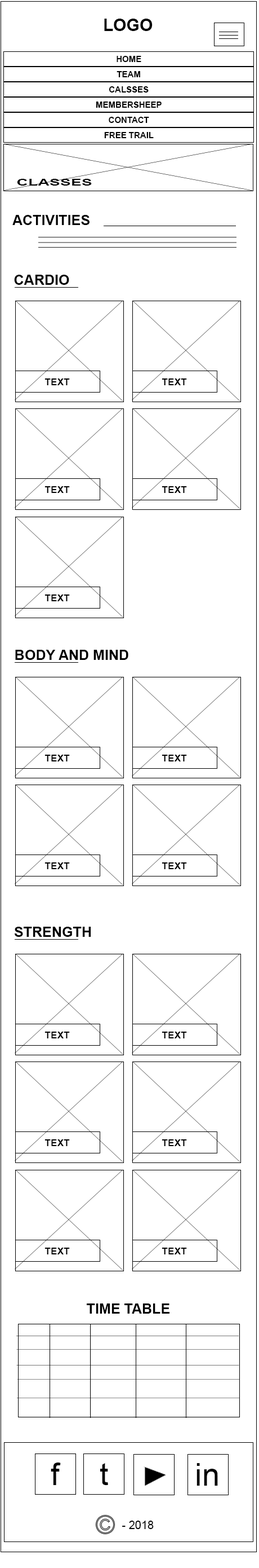
<style>
.page{position:relative;width:259px;height:1568px;background:#ffffff}
.page>*{position:absolute;margin:0}
.t1{font:16.9px "Arial-BoldMT";color:#000000}
.t2{font:8.5px "Arial-BoldMT";color:#000000}
.t3{font:8.8px "Arial-BoldMT";color:#000000;scale:1.82 1}
.t4{font:14.2px "Arial-BoldMT";color:#000000}
.t5{font:9.8px "Arial-BoldMT";color:#000000}
.t6{font:14.1px "Arial-BoldMT";color:#000000}
.t7{font:31.4px "ArialMT";color:#000000}
.t8{font:11.3px "ArialMT";color:#000000}
</style>
<div class="page">
<p class="t1" style="left:104px;top:19px;width:49px;height:12px">LOGO</p>
<p class="t2" style="left:117px;top:56px;width:25px;height:6px">HOME</p>
<p class="t2" style="left:117px;top:71px;width:23px;height:6px">TEAM</p>
<p class="t2" style="left:109px;top:86px;width:40px;height:7px">CALSSES</p>
<p class="t2" style="left:96px;top:102px;width:66px;height:6px">MEMBERSHEEP</p>
<p class="t2" style="left:109px;top:117px;width:40px;height:6px">CONTACT</p>
<p class="t2" style="left:104px;top:132px;width:50px;height:6px">FREE TRAIL</p>
<p class="t3" style="left:17px;top:179px;width:75px;height:7px">CLASSES</p>
<p class="t4" style="left:12px;top:215px;width:78px;height:10px">ACTIVITIES</p>
<p class="t4" style="left:14px;top:275px;width:55px;height:10px">CARDIO</p>
<p class="t5" style="left:45px;top:378px;width:25px;height:7px">TEXT</p>
<p class="t5" style="left:162px;top:378px;width:25px;height:7px">TEXT</p>
<p class="t5" style="left:45px;top:486px;width:25px;height:7px">TEXT</p>
<p class="t5" style="left:162px;top:486px;width:25px;height:7px">TEXT</p>
<p class="t5" style="left:45px;top:594px;width:25px;height:7px">TEXT</p>
<p class="t4" style="left:15px;top:650px;width:114px;height:10px">BODY AND MIND</p>
<p class="t5" style="left:45px;top:755px;width:25px;height:6px">TEXT</p>
<p class="t5" style="left:162px;top:755px;width:25px;height:6px">TEXT</p>
<p class="t5" style="left:45px;top:862px;width:25px;height:7px">TEXT</p>
<p class="t5" style="left:162px;top:862px;width:25px;height:7px">TEXT</p>
<p class="t4" style="left:14px;top:927px;width:77px;height:10px">STRENGTH</p>
<p class="t5" style="left:45px;top:1032px;width:25px;height:6px">TEXT</p>
<p class="t5" style="left:162px;top:1032px;width:25px;height:6px">TEXT</p>
<p class="t5" style="left:45px;top:1139px;width:25px;height:7px">TEXT</p>
<p class="t5" style="left:162px;top:1139px;width:25px;height:7px">TEXT</p>
<p class="t5" style="left:45px;top:1248px;width:25px;height:6px">TEXT</p>
<p class="t5" style="left:162px;top:1248px;width:25px;height:6px">TEXT</p>
<p class="t6" style="left:87px;top:1303px;width:83px;height:11px">TIME TABLE</p>
<p class="t7" style="left:51px;top:1463px;width:10px;height:22px">f</p>
<p class="t7" style="left:100px;top:1463px;width:8px;height:22px">t</p>
<p class="t7" style="left:197px;top:1463px;width:21px;height:23px">in</p>
<p class="t8" style="left:122px;top:1521px;width:32px;height:8px">- 2018</p>
</div>
